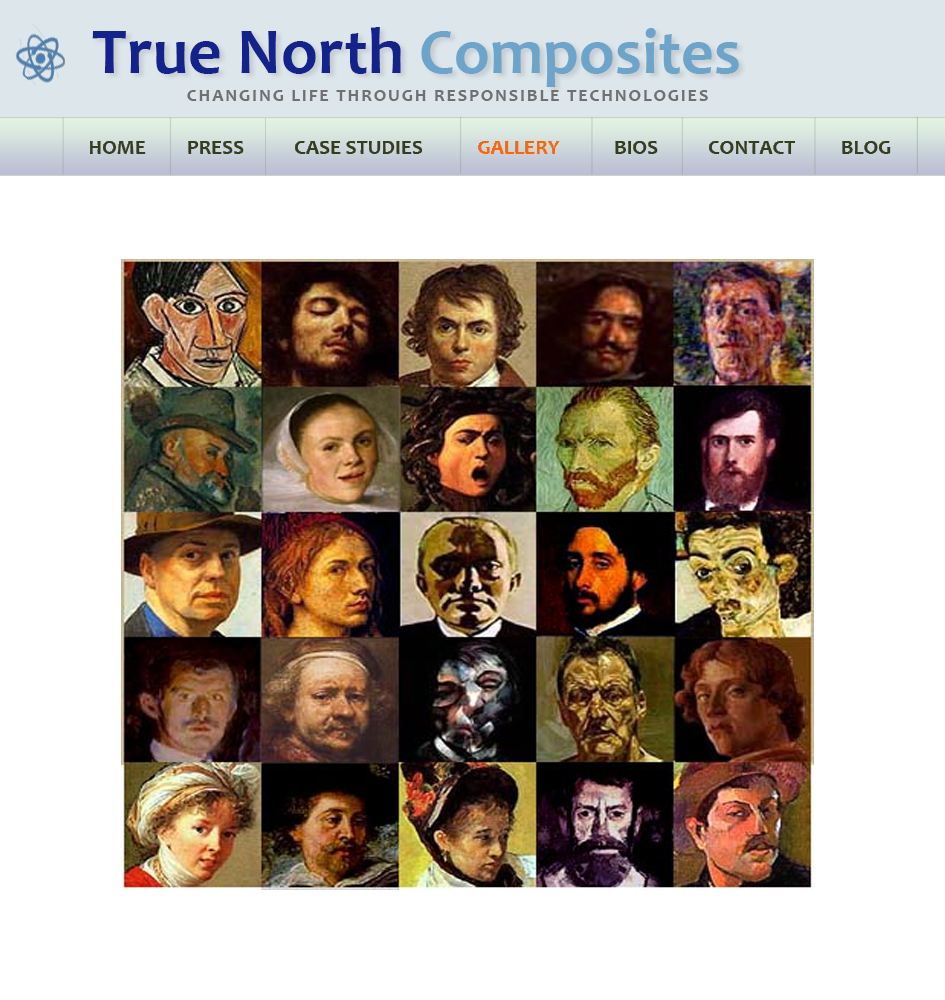
<style>
.page{position:relative;width:945px;height:1000px;background:#ffffff}
.page>*{position:absolute;margin:0}
.t1{font:66.4px "Candara-Bold";color:#14228b}
.t2{font:64.2px "Candara-Bold";color:#6da4c9}
.t3{font:18px "Candara-Bold";letter-spacing:0.1em;color:#707070;text-transform:uppercase}
.t4{font:21px "Candara-Bold";color:#353d1d;text-transform:uppercase}
.t5{font:21px "Candara-Bold";color:#ff6600;text-transform:uppercase}
</style>
<div class="page">
<p class="t1" style="left:92px;top:27px;width:647px;height:60px">True North <span class="t2">Composites</span></p>
<p class="t3" style="left:187px;top:90px;width:521px;height:11px">Changing life through responsible technologies</p>
<p class="t4" style="left:90px;top:141px;width:801px;height:13px">Home         Press           Case Studies            <span class="t5">Gallery</span>            Bios           Contact          Blog</p>
</div>
